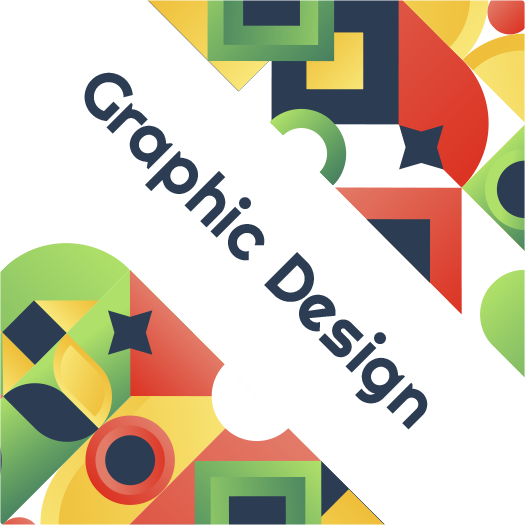
<style>
.page{position:relative;width:525px;height:525px;background:#ffffff}
.page>*{position:absolute;margin:0}
.t1{font:66.7px "Righteous-Regular";color:#2b3c53}
</style>
<div class="page">
<p class="t1" style="left:84px;top:72px;width:344px;height:358px;rotate:45deg">Graphic Design</p>
</div>
